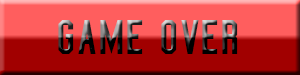
<style>
.page{position:relative;width:300px;height:75px;background:#a10000}
.page>*{position:absolute;margin:0}
.t1{font:50px "CollegeCondensed"}
</style>
<div class="page">
<p class="t1" style="left:58px;top:20px;width:180px;height:34px">Game Over</p>
</div>
